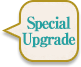
<style>
.page{position:relative;width:81px;height:67px;background:#f6eee6}
.page>*{position:absolute;margin:0}
.t1{font:16px/16px "RyuminPro-ExBold";letter-spacing:-0.08em;color:#26a2a2;font-weight:bold;scale:0.9 1}
</style>
<div class="page">
<p class="t1" style="left:22px;top:16px;width:54px;height:32px;text-align:center">Special<br>Upgrade</p>
</div>
